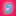
<style>
.page{position:relative;width:16px;height:16px}
.page>*{position:absolute;margin:0}
.t1{font:12.1px "ComicSansMS-Bold";color:#43b0d8;font-style:italic}
</style>
<div class="page">
<p class="t1" style="left:4px;top:3px;width:8px;height:10px">5</p>
</div>
